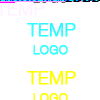
<style>
.page{position:relative;width:100px;height:100px;background:#ffffff}
.page>*{position:absolute;margin:0}
.t1{font:18px "HelveticaNeue-Light";font-weight:bold}
.t2{font:12.4px "HelveticaNeue-Light";font-weight:bold}
</style>
<div class="page">
<p class="t1" style="left:27px;top:22px;width:49px;height:14px">TEMP</p>
<p class="t2" style="left:33px;top:44px;width:35px;height:10px">LOGO</p>
</div>
